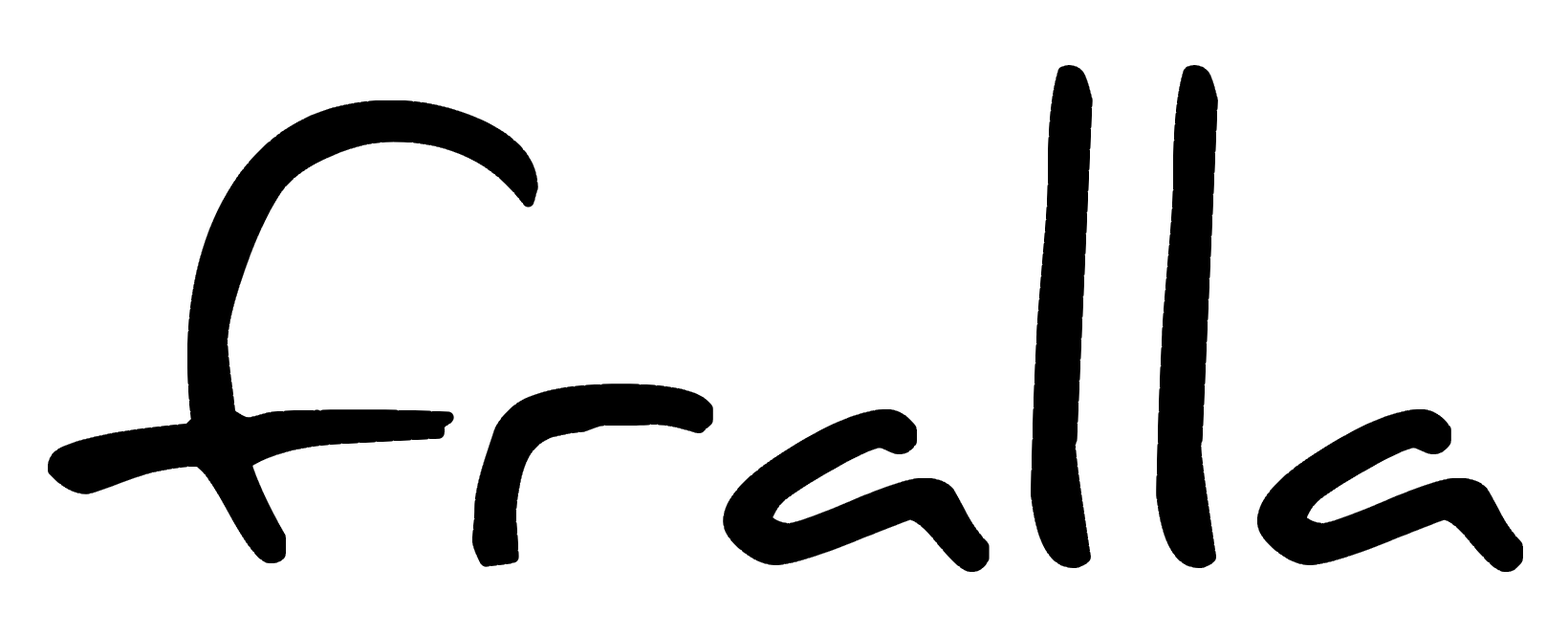
<style>
.page{position:relative;width:1568px;height:635px;background:#ffffff}
.page>*{position:absolute;margin:0}
.t1{font:550px "Daniel-Regular";color:#000000}
</style>
<div class="page">
<p class="t1" style="left:53px;top:71px;width:1465px;height:496px">fralla</p>
</div>
